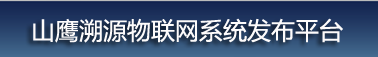
<style>
.page{position:relative;width:378px;height:57px}
.page>*{position:absolute;margin:0}
.t1{font:24px "MicrosoftYaHei";color:#fdfbfb}
</style>
<div class="page">
<p class="t1" style="left:33px;top:18px;width:310px;height:25px">山鹰溯源物联网系统发布平台</p>
</div>
